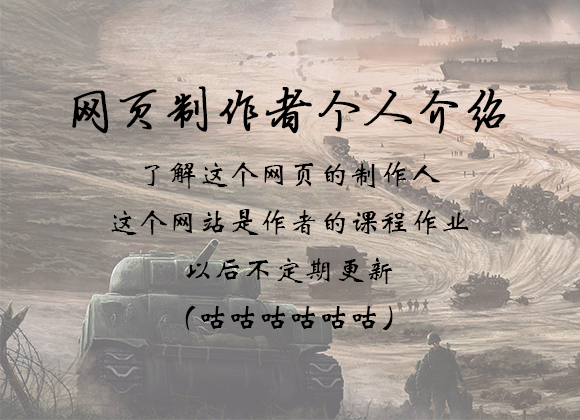
<style>
.page{position:relative;width:580px;height:420px}
.page>*{position:absolute;margin:0}
.t1{font:30px/48px "STXinwei";letter-spacing:0.01em;color:#000000}
.t2{font:48px/72px "FZYBXSJW--GB1-0";letter-spacing:0.01em;color:#000000;font-weight:bold}
</style>
<div class="page">
<p class="t1" style="left:72px;top:86px;width:434px;height:245px;text-align:center"><span class="t2">网页制作者个人介绍<br></span>了解这个网页的制作人<br>这个网站是作者的课程作业<br>以后不定期更新<br>（咕咕咕咕咕咕）</p>
</div>
